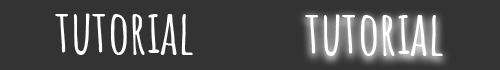
<style>
.page{position:relative;width:500px;height:70px;background:#333333}
.page>*{position:absolute;margin:0}
.t1{font:60px "AmaticSC-Bold";color:#ffffff}
</style>
<div class="page">
<p class="t1" style="left:55px;top:13px;width:138px;height:42px">tutorial</p>
<p class="t1" style="left:305px;top:14px;width:138px;height:42px">tutorial</p>
</div>
